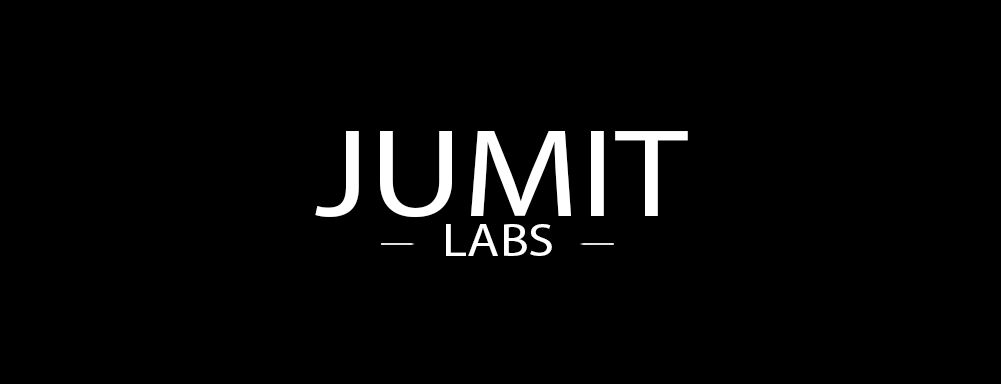
<style>
.page{position:relative;width:1001px;height:384px;background:#000000}
.page>*{position:absolute;margin:0}
.t1{font:126.7px "MyriadPro-Regular";color:#ffffff;scale:1.15 1}
.t2{font:46.1px "MyriadPro-Regular";color:#ffffff;scale:1.15 1}
</style>
<div class="page">
<p class="t1" style="left:315px;top:131px;width:373px;height:86px">JUMIT</p>
<p class="t2" style="left:446px;top:224px;width:106px;height:32px">LABS</p>
</div>
